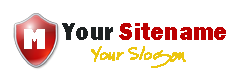
<style>
.page{position:relative;width:245px;height:83px;background:#ffffff}
.page>*{position:absolute;margin:0}
.t1{font:26.4px "GillSans-UltraBold";color:#ffffff;scale:0.92 1}
.t2{font:26.4px "FranklinGothic-Heavy";color:#bc0001;scale:0.92 1}
.t3{font:26.4px "FranklinGothic-Heavy";color:#1d2122;scale:0.92 1}
.t4{font:22px "EspecialKay";color:#ecc60f;font-weight:bold;scale:1.1 1}
</style>
<div class="page">
<p class="t1" style="left:24px;top:29px;width:21px;height:20px">M</p>
<p class="t2" style="left:62px;top:23px;width:164px;height:17px"><span class="t3">Your </span>Sitename</p>
<p class="t4" style="left:91px;top:46px;width:95px;height:22px">Your Slogan</p>
</div>
